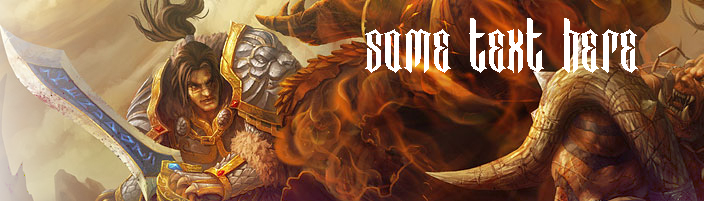
<style>
.page{position:relative;width:704px;height:201px}
.page>*{position:absolute;margin:0}
.t1{font:60px "BadBoys";color:#ffffff}
</style>
<div class="page">
<p class="t1" style="left:365px;top:18px;width:273px;height:55px">Some text here</p>
</div>
